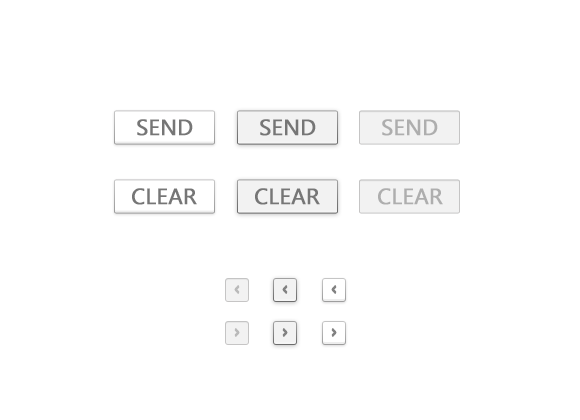
<style>
.page{position:relative;width:580px;height:420px;background:#ffffff}
.page>*{position:absolute;margin:0}
.t1{font:22px "SegoeUI";color:#767676;font-weight:bold}
.t2{font:22px "SegoeUI";color:#aeaeae;font-weight:bold}
</style>
<div class="page">
<p class="t1" style="left:137px;top:119px;width:56px;height:17px">SEND</p>
<p class="t1" style="left:260px;top:119px;width:56px;height:17px">SEND</p>
<p class="t2" style="left:382px;top:119px;width:56px;height:17px">SEND</p>
<p class="t1" style="left:132px;top:188px;width:65px;height:17px">CLEAR</p>
<p class="t1" style="left:255px;top:188px;width:65px;height:17px">CLEAR</p>
<p class="t2" style="left:378px;top:188px;width:65px;height:17px">CLEAR</p>
</div>
